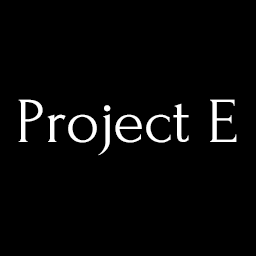
<style>
.page{position:relative;width:256px;height:256px;background:#000000}
.page>*{position:absolute;margin:0}
.t1{font:64px "Forum";color:#ffffff}
</style>
<div class="page">
<p class="t1" style="left:18px;top:99px;width:219px;height:57px">Project E</p>
</div>
